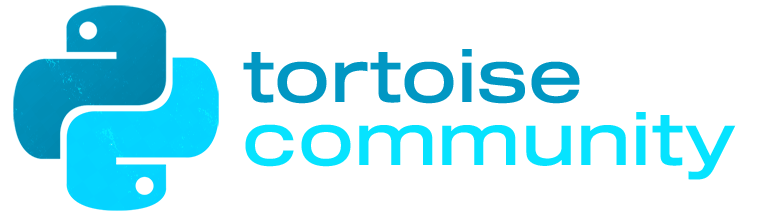
<style>
.page{position:relative;width:761px;height:219px;background:#ffffff}
.page>*{position:absolute;margin:0}
.t1{font:72.7px/63.1px "Sequel100Black-45";color:#06e3ff}
.t2{font:72.7px/63.1px "Sequel100Black-45";color:#0197c3}
</style>
<div class="page">
<p class="t1" style="left:243px;top:49px;width:493px;height:131px"><span class="t2">tortoise<br></span>community</p>
</div>
